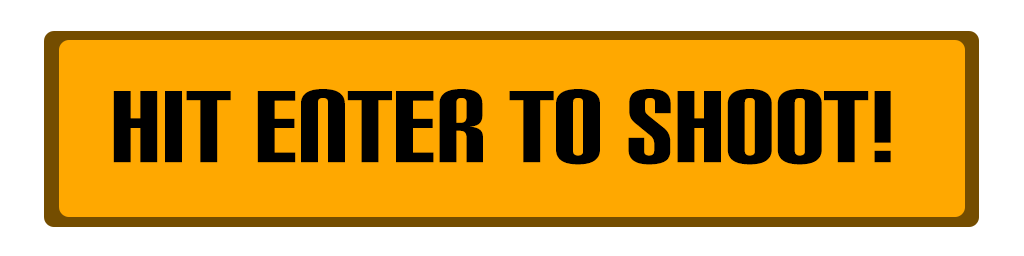
<style>
.page{position:relative;width:1024px;height:256px;background:#ffa800}
.page>*{position:absolute;margin:0}
.t1{font:100px "CarbonBl-Regular";color:#000000}
</style>
<div class="page">
<p class="t1" style="left:113px;top:89px;width:778px;height:76px">Hit ENTER to shoot!</p>
</div>
